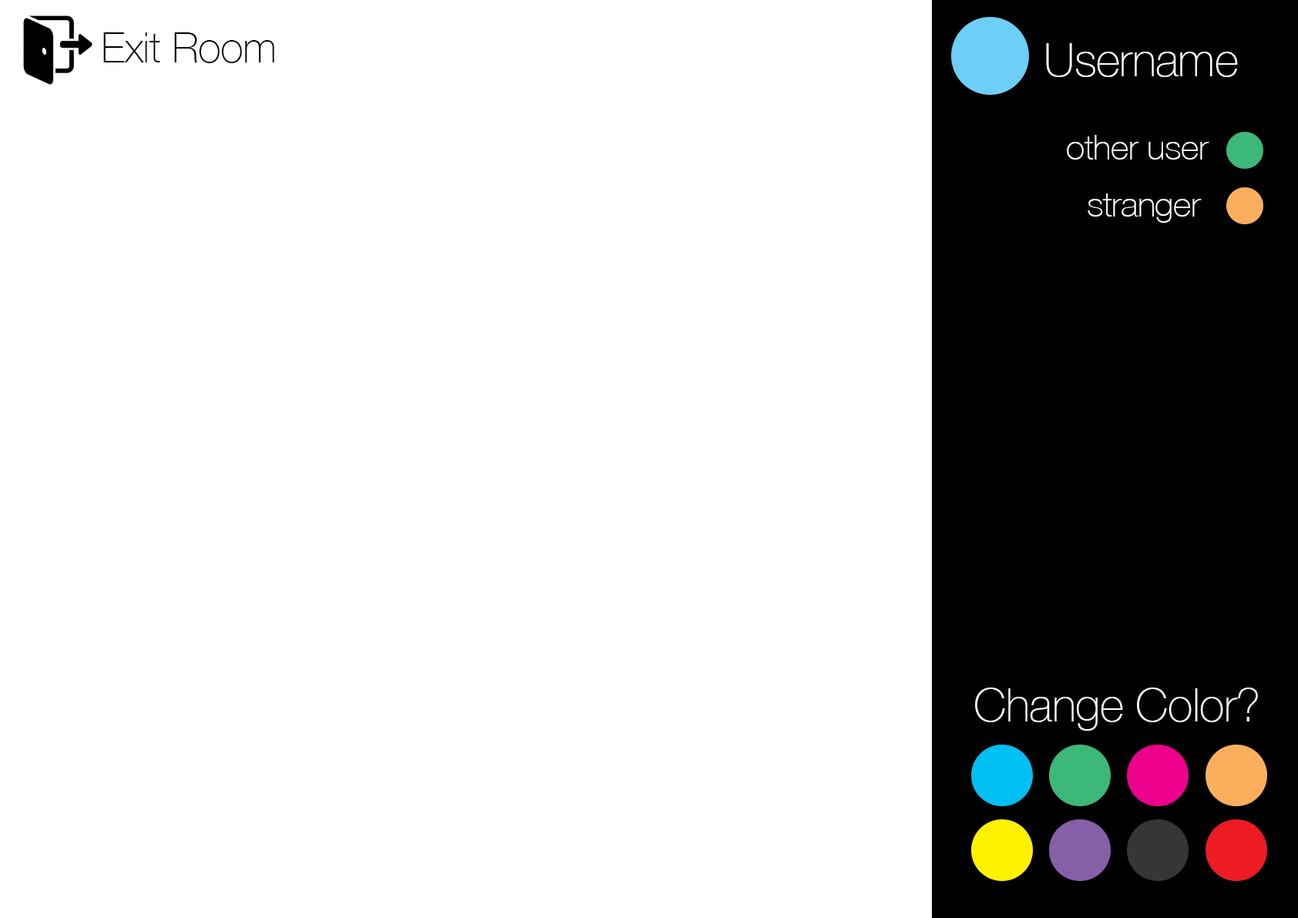
<style>
.page{position:relative;width:1298px;height:918px;background:#ffffff}
.page>*{position:absolute;margin:0}
.t1{font:42.4px "HelveticaNeue-Thin";letter-spacing:-0.01em;color:#000000}
.t2{font:46.3px "HelveticaNeue-Thin";letter-spacing:-0.01em;color:#ffffff}
.t3{font:34.7px "HelveticaNeue-Thin";letter-spacing:-0.01em;color:#ffffff}
</style>
<div class="page">
<p class="t1" style="left:103px;top:32px;width:171px;height:31px">Exit Room</p>
<p class="t2" style="left:1046px;top:43px;width:192px;height:34px">Username</p>
<p class="t3" style="left:1067px;top:135px;width:143px;height:25px">other user</p>
<p class="t3" style="left:1088px;top:194px;width:114px;height:29px">stranger</p>
<p class="t2" style="left:975px;top:688px;width:283px;height:43px">Change Color?</p>
</div>
